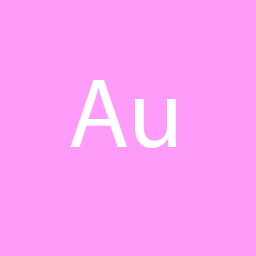
<style>
.page{position:relative;width:256px;height:256px;background:#ff9bf9}
.page>*{position:absolute;margin:0}
.t1{font:100px "MyriadPro-Regular";color:#ffffff}
</style>
<div class="page">
<p class="t1" style="left:70px;top:80px;width:107px;height:68px">Au</p>
</div>
